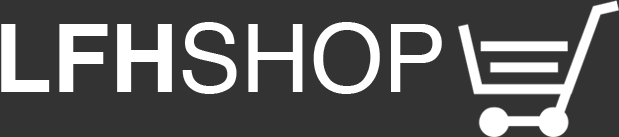
<style>
.page{position:relative;width:619px;height:137px;background:#333333}
.page>*{position:absolute;margin:0}
.t1{font:94.8px "Helvetica";color:#ffffff}
.t2{font:94.8px "Helvetica-Bold";color:#ffffff}
</style>
<div class="page">
<p class="t1" style="left:1px;top:22px;width:441px;height:72px"><span class="t2">LFH</span>SHOP</p>
</div>
